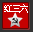
<style>
.page{position:relative;width:33px;height:32px;background:#c50000}
.page>*{position:absolute;margin:0}
.t1{font:10.4px "SimSun";letter-spacing:-0.25em;color:#ffffff}
</style>
<div class="page">
<p class="t1" style="left:4px;top:4px;width:24px;height:9px">红三六</p>
</div>
